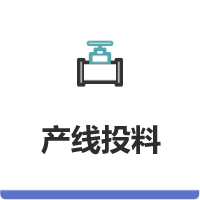
<style>
.page{position:relative;width:200px;height:200px;background:#ffffff}
.page>*{position:absolute;margin:0}
.t1{font:30px "MicrosoftYaHei-Bold";color:#2d2d2d}
</style>
<div class="page">
<p class="t1" style="left:41px;top:125px;width:120px;height:30px">产线投料</p>
</div>
